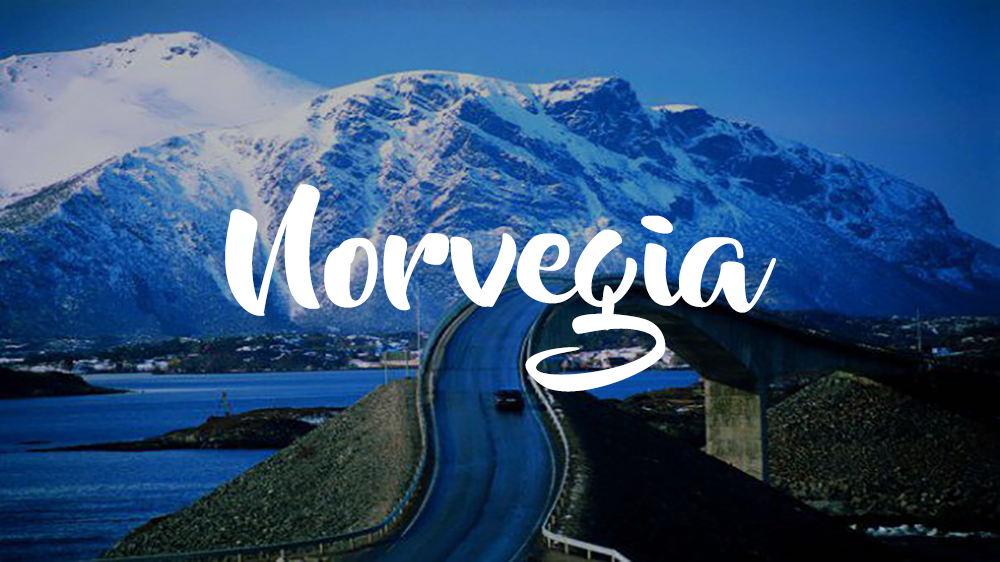
<style>
.page{position:relative;width:1000px;height:562px}
.page>*{position:absolute;margin:0}
.t1{font:129.7px "BeyondTheMountains";letter-spacing:-0.02em;color:#ffffff;scale:1.25 1}
</style>
<div class="page">
<p class="t1" style="left:225px;top:184px;width:551px;height:208px">Norvegia</p>
</div>
